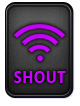
<style>
.page{position:relative;width:80px;height:106px;background:#ffffff}
.page>*{position:absolute;margin:0}
.t1{font:16px "DroidSans-Bold";color:#c800ff}
</style>
<div class="page">
<p class="t1" style="left:14px;top:71px;width:52px;height:12px">SHOUT</p>
</div>
